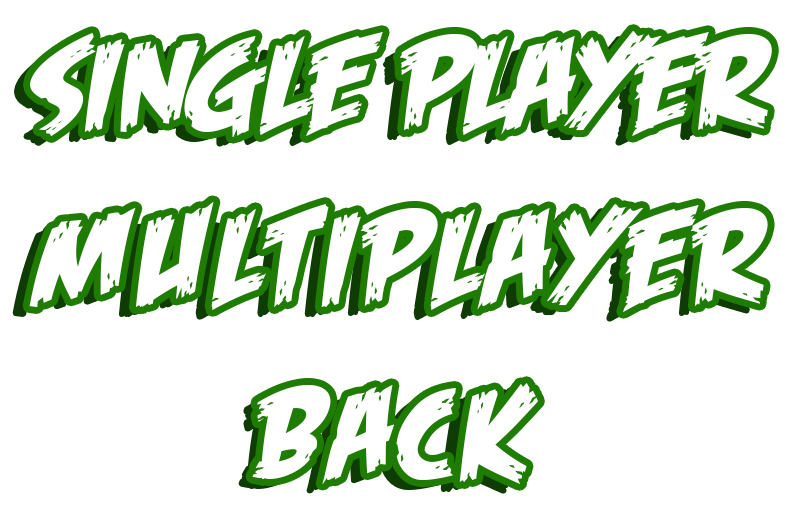
<style>
.page{position:relative;width:789px;height:525px;background:#ffffff}
.page>*{position:absolute;margin:0}
.t1{font:133.2px "FeastofFleshBBItalic";letter-spacing:0.02em;color:#ffffff;scale:1.04 1}
.t2{font:136.5px "FeastofFleshBBItalic";letter-spacing:0.08em;color:#ffffff}
.t3{font:133.2px "FeastofFleshBBItalic";letter-spacing:0.09em;color:#ffffff}
</style>
<div class="page">
<p class="t1" style="left:30px;top:31px;width:742px;height:106px">single player</p>
<p class="t2" style="left:29px;top:202px;width:739px;height:110px">multiplayer</p>
<p class="t3" style="left:252px;top:383px;width:286px;height:101px">back</p>
</div>
